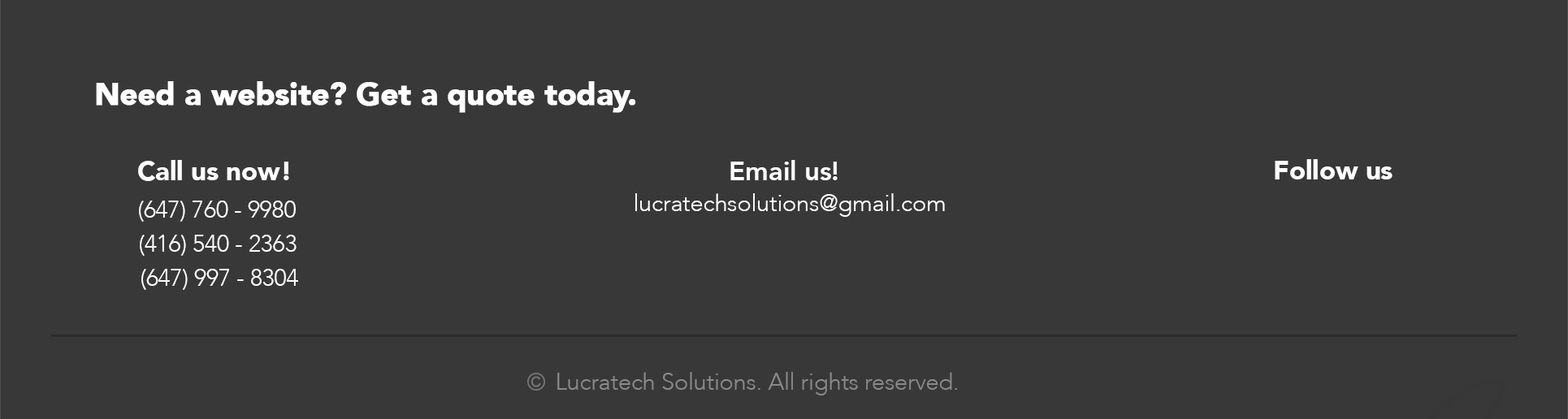
<style>
.page{position:relative;width:1568px;height:419px;background:#383838}
.page>*{position:absolute;margin:0}
.t1{font:30.5px "Avenir-Black";letter-spacing:-0.01em;color:#ffffff;font-weight:bold}
.t2{font:27.1px "Avenir-Black";letter-spacing:-0.01em;color:#ffffff}
.t3{font:27.1px "Avenir-Heavy";letter-spacing:-0.01em;color:#ffffff}
.t4{font:23.7px "Avenir-Light";letter-spacing:-0.01em;color:#ffffff}
.t5{font:23.7px "Avenir-Light";letter-spacing:-0.01em;color:#898989}
</style>
<div class="page">
<p class="t1" style="left:96px;top:81px;width:540px;height:32px">Need a website? Get a quote today.</p>
<p class="t2" style="left:138px;top:160px;width:151px;height:21px">Call us now!</p>
<p class="t3" style="left:730px;top:160px;width:108px;height:20px">Email us!</p>
<p class="t2" style="left:1275px;top:159px;width:118px;height:21px">Follow us</p>
<p class="t4" style="left:635px;top:193px;width:310px;height:24px">lucratechsolutions@gmail.com</p>
<p class="t4" style="left:139px;top:201px;width:157px;height:21px">(647) 760 - 9980</p>
<p class="t4" style="left:140px;top:235px;width:157px;height:21px">(416) 540 - 2363</p>
<p class="t4" style="left:141px;top:269px;width:157px;height:21px">(647) 997 - 8304</p>
<p class="t5" style="left:557px;top:372px;width:401px;height:24px">Lucratech Solutions. All rights reserved.</p>
</div>
